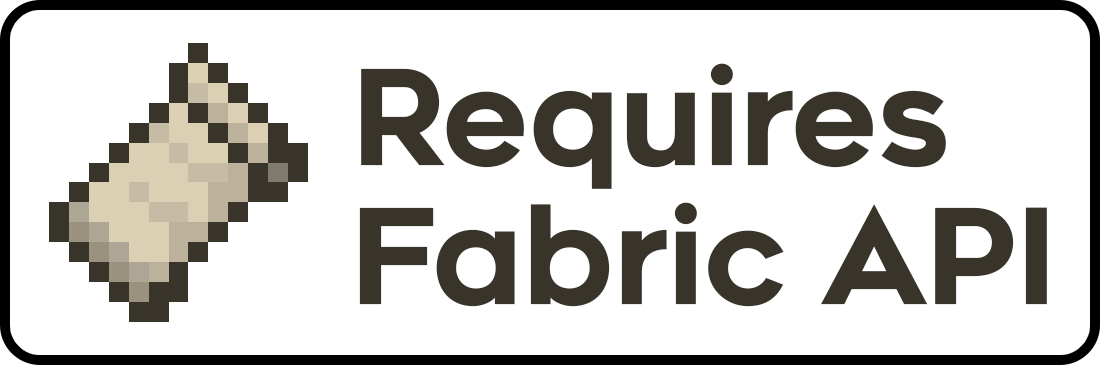
<style>
.page{position:relative;width:1100px;height:365px;background:#ffffff}
.page>*{position:absolute;margin:0}
.t1{font:131.7px "Renogare-Regular";letter-spacing:-0.05em;color:#38342a;font-weight:bold}
</style>
<div class="page">
<p class="t1" style="left:361px;top:63px;width:585px;height:126px">Requires</p>
<p class="t1" style="left:359px;top:202px;width:688px;height:105px">Fabric API</p>
</div>
